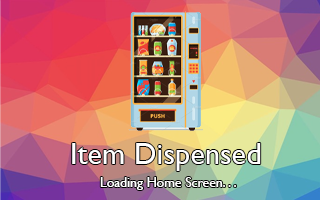
<style>
.page{position:relative;width:320px;height:200px}
.page>*{position:absolute;margin:0}
.t1{font:30.4px "GillSansMT";color:#ffffff}
.t2{font:13.7px "GillSansMT";color:#ffffff}
</style>
<div class="page">
<p class="t1" style="left:72px;top:143px;width:189px;height:28px">Item Dispensed</p>
<p class="t2" style="left:100px;top:177px;width:136px;height:13px">Loading Home Screen. . .</p>
</div>
